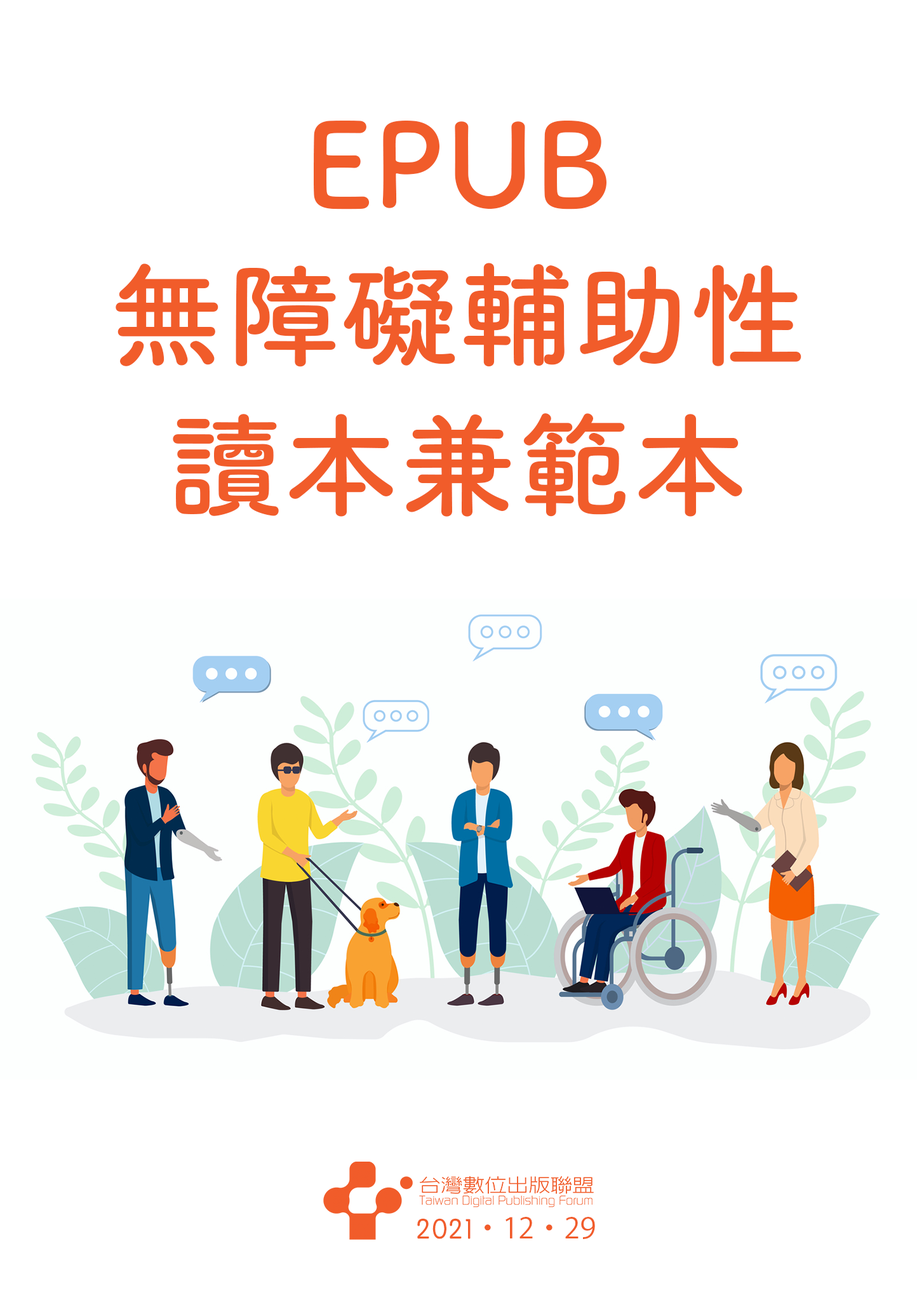
<style>
.page{position:relative;width:917px;height:1300px;background:#ffffff}
.page>*{position:absolute;margin:0}
.t1{font:114.1px/150.8px "TsukuARdGothic-Bold";color:#f15c2a}
.t2{font:28.5px "KozGoPr6N-Regular";color:#f15c2a}
.t3{font:28.5px "STYuanti-TC-Regular";color:#f15c2a}
</style>
<div class="page">
<p class="t1" style="left:116px;top:121px;width:685px;height:396px;text-align:center">EPUB<br>無障礙輔助性<br>讀本兼範本</p>
<p class="t2" style="left:417px;top:1217px;width:178px;height:23px"><span class="t3">2021</span>・12・29</p>
</div>
